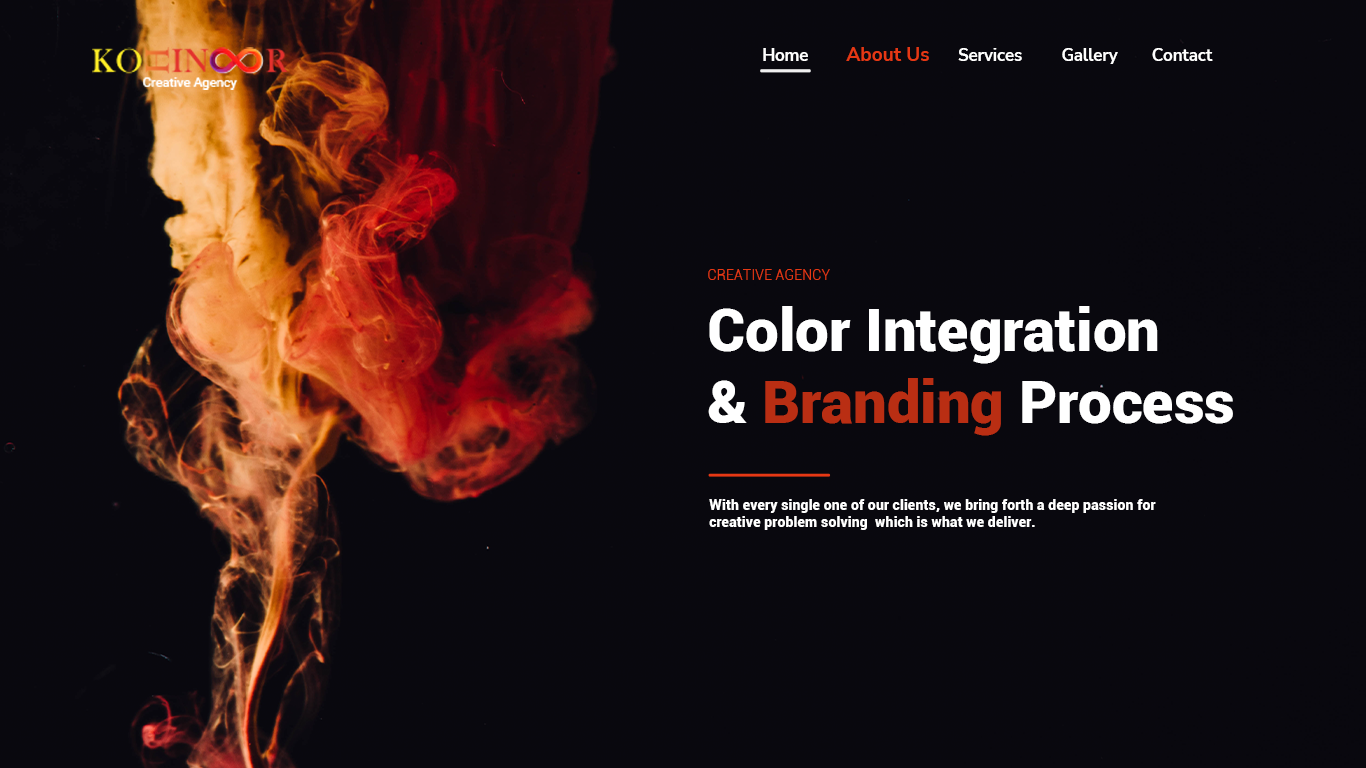
<style>
.page{position:relative;width:1366px;height:768px;background:#09080e}
.page>*{position:absolute;margin:0}
.t1{font:16.6px "NunitoSans-Bold";color:#ffffff}
.t2{font:19px "NunitoSans-Bold";color:#e53814}
.t3{font:14.4px "Roboto-Light";color:#e53814}
.t4{font:59.8px "Roboto-Black";color:#ffffff}
.t5{font:59.8px "Roboto-Black";color:#b92e13}
.t6{font:14.4px "Roboto-Black";color:#ffffff}
</style>
<div class="page">
<p class="t1" style="left:763px;top:48px;width:45px;height:13px">Home</p>
<p class="t2" style="left:846px;top:47px;width:83px;height:14px">About Us</p>
<p class="t1" style="left:958px;top:48px;width:64px;height:13px">Services</p>
<p class="t1" style="left:1062px;top:48px;width:56px;height:16px">Gallery</p>
<p class="t1" style="left:1152px;top:48px;width:61px;height:13px">Contact</p>
<p class="t3" style="left:708px;top:269px;width:122px;height:11px">CREATIVE AGENCY</p>
<p class="t4" style="left:708px;top:306px;width:525px;height:130px">Color Integration<br>&amp; <span class="t5">Branding</span> Process</p>
<p class="t6" style="left:709px;top:499px;width:447px;height:31px">With every single one of our clients, we bring forth a deep passion for creative problem solving  which is what we deliver.</p>
</div>
